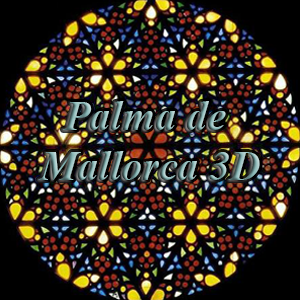
<style>
.page{position:relative;width:300px;height:300px}
.page>*{position:absolute;margin:0}
.t1{font:42px "TimesNewRomanPS-BoldItalicMT"}
</style>
<div class="page">
<p class="t1" style="left:38px;top:101px;width:222px;height:79px;text-align:center">Palma de <br>Mallorca 3D</p>
</div>
